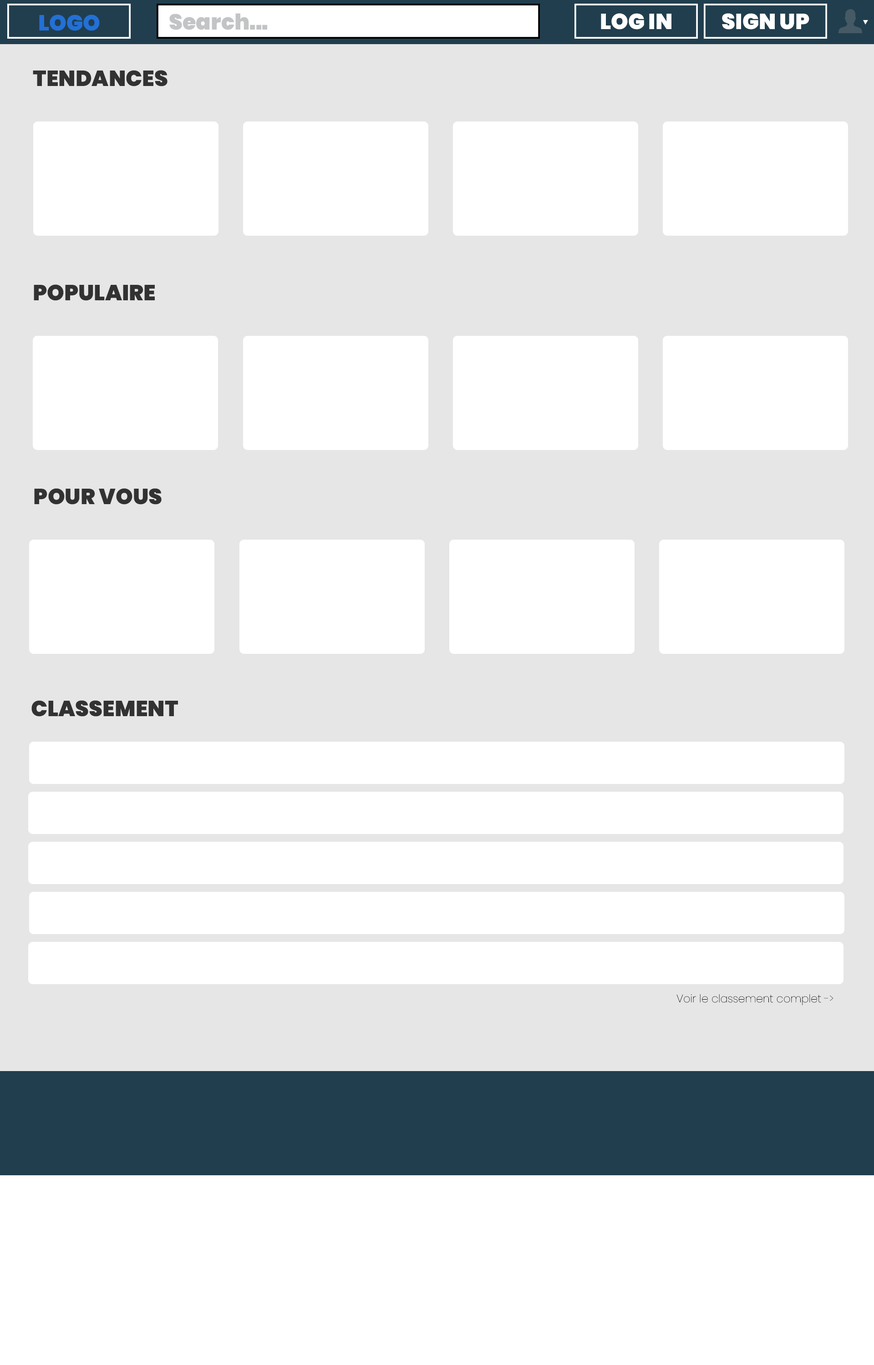
<style>
.page{position:relative;width:874px;height:1365px;background:#ffffff}
.page>*{position:absolute;margin:0}
.t1{font:21.8px "Poppins-Black";color:#2370d6}
.t2{font:21.8px "Poppins-Black";color:#c2c4c6}
.t3{font:21.8px "Poppins-Black";color:#ffffff}
.t4{font:21.8px "Poppins-Black";color:#323232}
.t5{font:10.9px "Poppins-Thin";color:#000000}
</style>
<div class="page">
<p class="t1" style="left:39px;top:15px;width:61px;height:16px">LOGO</p>
<p class="t2" style="left:169px;top:13px;width:98px;height:17px">Search...</p>
<p class="t3" style="left:601px;top:13px;width:70px;height:17px">LOG IN</p>
<p class="t3" style="left:722px;top:13px;width:87px;height:17px">SIGN UP</p>
<p class="t4" style="left:33px;top:70px;width:134px;height:16px">TENDANCES</p>
<p class="t4" style="left:34px;top:284px;width:121px;height:17px">POPULAIRE</p>
<p class="t4" style="left:34px;top:488px;width:128px;height:17px">POUR VOUS</p>
<p class="t4" style="left:31px;top:700px;width:147px;height:17px">CLASSEMENT</p>
<p class="t5" style="left:676px;top:994px;width:157px;height:12px">Voir le classement complet -&gt;</p>
</div>
